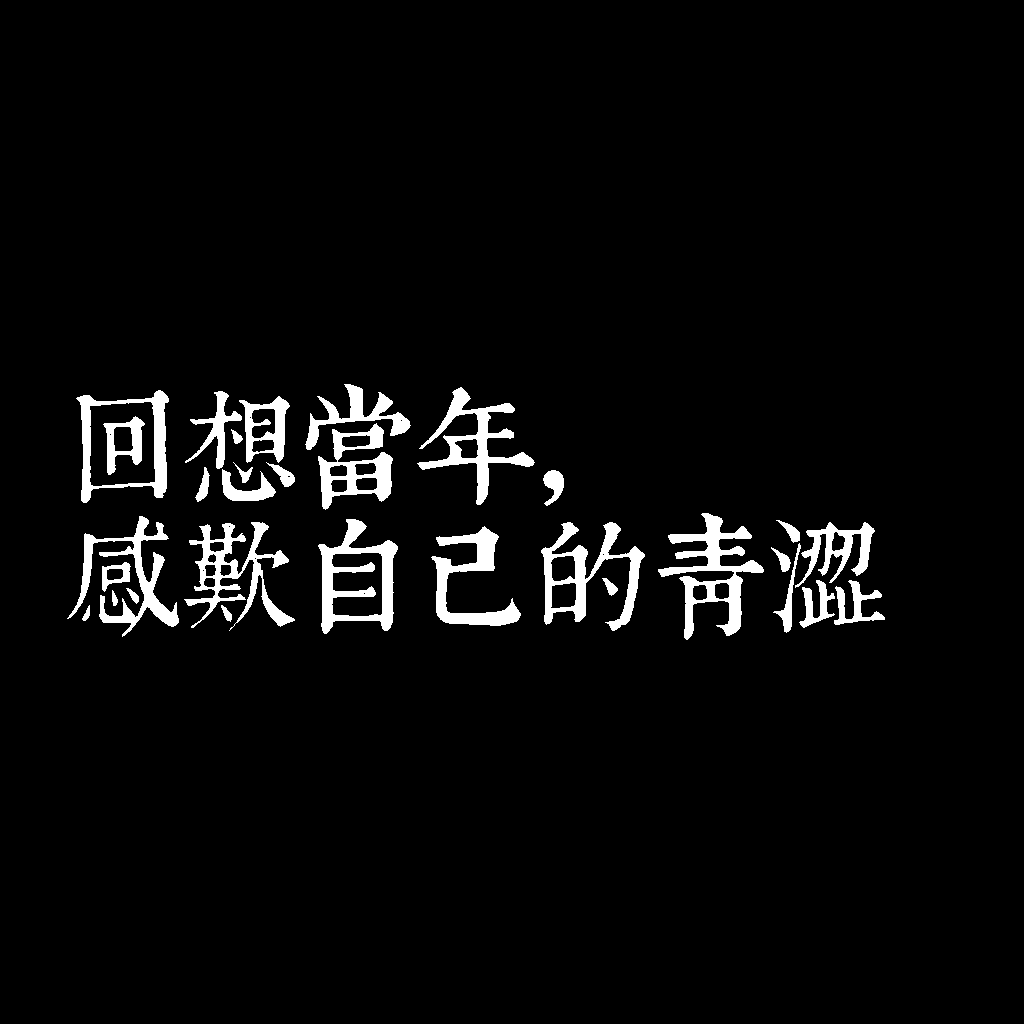
<style>
.page{position:relative;width:1024px;height:1024px;background:#000000}
.page>*{position:absolute;margin:0}
.t1{font:120px/130px "TpldKhangXiDictTrial";letter-spacing:-0.02em;color:#ffffff}
</style>
<div class="page">
<p class="t1" style="left:67px;top:384px;width:818px;height:256px">回想當年，<br>感歎自己的青澀</p>
</div>
